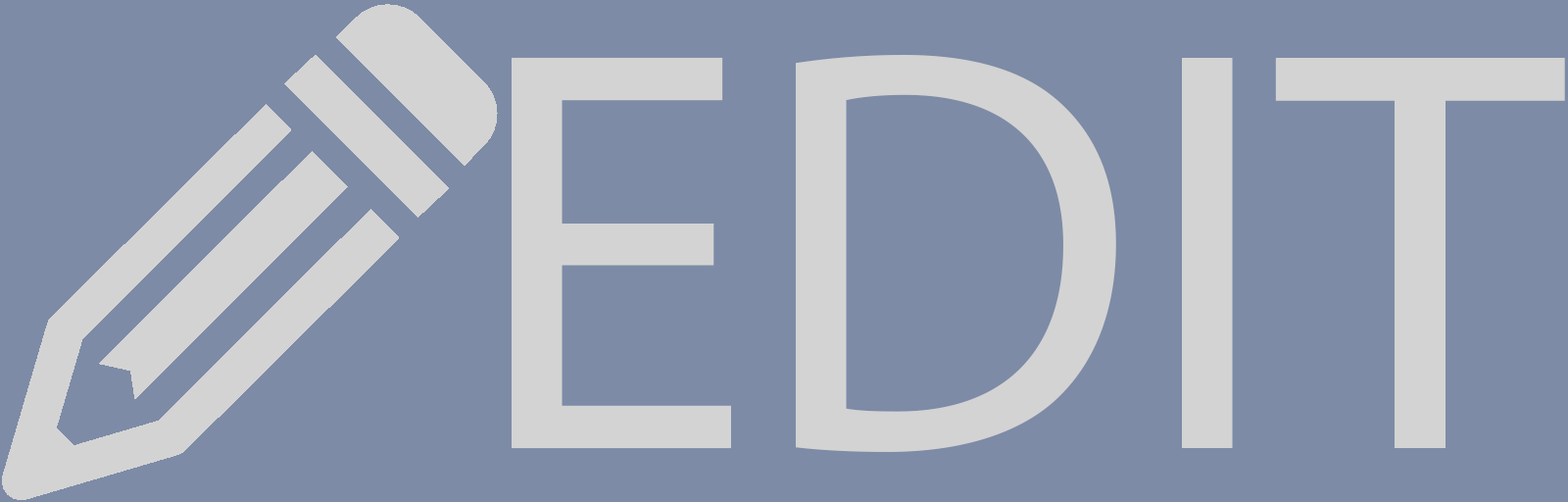
<style>
.page{position:relative;width:1568px;height:502px;background:#7d8ba6}
.page>*{position:absolute;margin:0}
.t1{font:579px "MyriadPro-Regular";color:#d3d3d3}
</style>
<div class="page">
<p class="t1" style="left:512px;top:55px;width:1053px;height:397px">EDIT</p>
</div>
